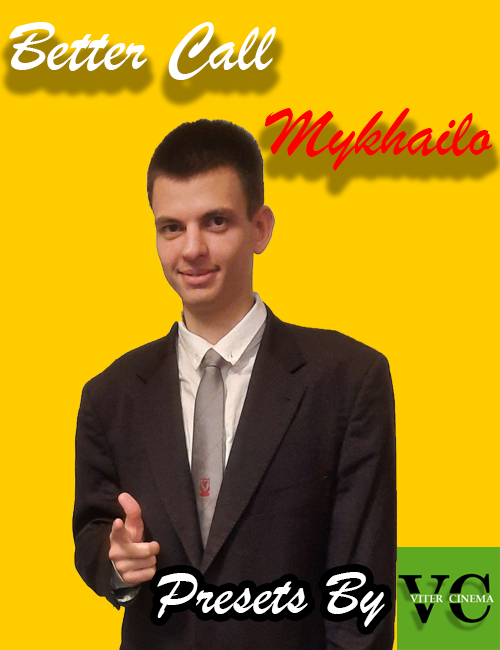
<style>
.page{position:relative;width:500px;height:650px;background:#ffcc00}
.page>*{position:absolute;margin:0}
.t1{font:71.6px "BrushScriptMT";color:#ffffff}
.t2{font:71.6px "BrushScriptMT";color:#ff0000}
.t3{font:169px "BrushScriptMT";color:#f00000}
.t4{font:63.5px "BrushScriptMT";color:#ffffff}
</style>
<div class="page">
<p class="t1" style="left:9px;top:22px;width:484px;height:149px">Better Call <br><span class="t2">      Mykhailo<br></span><span class="t3">       Mykhailo</span></p>
<p class="t4" style="left:157px;top:572px;width:228px;height:55px">Presets By</p>
</div>
